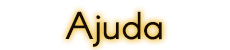
<style>
.page{position:relative;width:230px;height:50px;background:#ffffff}
.page>*{position:absolute;margin:0}
.t1{font:38px "Arcon-Regular";color:#160c00}
</style>
<div class="page">
<p class="t1" style="left:65px;top:11px;width:97px;height:36px">Ajuda</p>
</div>
